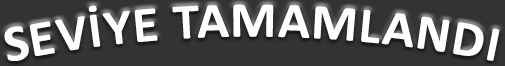
<style>
.page{position:relative;width:505px;height:66px;background:#333333}
.page>*{position:absolute;margin:0}
.t1{font:50px "Calibri-Bold";letter-spacing:0.025em;color:#ffffff}
</style>
<div class="page">
<p class="t1" style="left:4px;top:4px;width:496px;height:57px">SEVİYE TAMAMLANDI</p>
</div>
